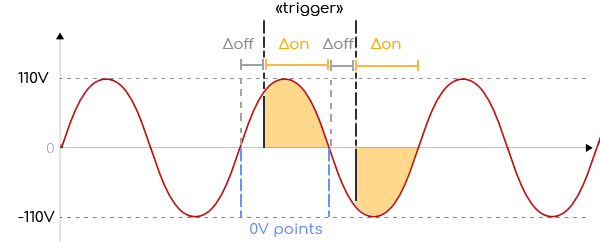
<style>
.page{position:relative;width:600px;height:242px;background:#ffffff}
.page>*{position:absolute;margin:0}
.t1{font:15px "Comfortaa-Regular";color:#000000}
.t2{font:15px "Comfortaa-Regular";color:#8c8c8c}
.t3{font:15px "Comfortaa-Regular";color:#ffa800}
.t4{font:15px "Comfortaa-Regular";color:#6990ff}
</style>
<div class="page">
<p class="t1" style="left:276px;top:2px;width:67px;height:14px">«trigger»</p>
<p class="t2" style="left:222px;top:38px;width:32px;height:11px">Δoff</p>
<p class="t3" style="left:278px;top:38px;width:31px;height:11px">Δon</p>
<p class="t2" style="left:322px;top:38px;width:32px;height:11px">Δoff</p>
<p class="t3" style="left:370px;top:38px;width:31px;height:11px">Δon</p>
<p class="t1" style="left:18px;top:72px;width:31px;height:11px">110V</p>
<p class="t1" style="left:18px;top:211px;width:37px;height:11px">-110V</p>
<p class="t4" style="left:250px;top:223px;width:73px;height:14px">0V points</p>
</div>
